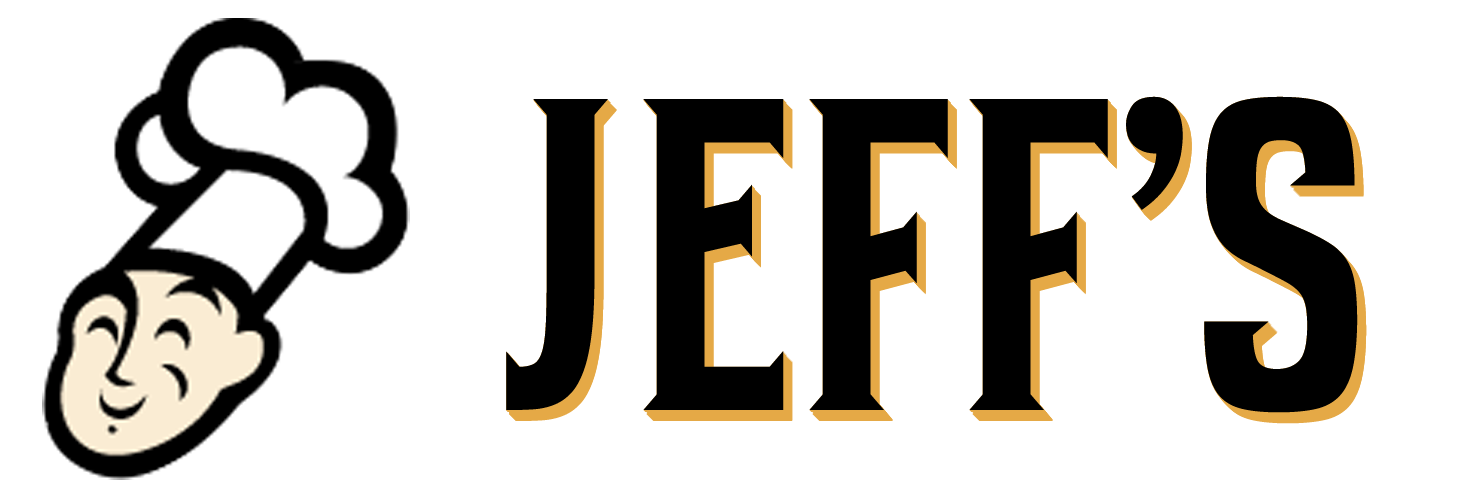
<style>
.page{position:relative;width:1465px;height:497px;background:#ffffff}
.page>*{position:absolute;margin:0}
.t1{font:444.4px "BartenderW01-Regular";letter-spacing:-0.03em;color:#000000}
</style>
<div class="page">
<p class="t1" style="left:506px;top:96px;width:852px;height:317px">JEFF’S</p>
<p class="t1" style="left:506px;top:97px;width:852px;height:317px">JEFF’S</p>
<p class="t1" style="left:506px;top:96px;width:852px;height:317px">JEFF’S</p>
<p class="t1" style="left:507px;top:97px;width:852px;height:317px">JEFF’S</p>
<p class="t1" style="left:507px;top:98px;width:852px;height:317px">JEFF’S</p>
<p class="t1" style="left:508px;top:98px;width:852px;height:317px">JEFF’S</p>
<p class="t1" style="left:509px;top:99px;width:852px;height:317px">JEFF’S</p>
<p class="t1" style="left:509px;top:100px;width:852px;height:317px">JEFF’S</p>
<p class="t1" style="left:509px;top:101px;width:852px;height:317px">JEFF’S</p>
<p class="t1" style="left:510px;top:101px;width:852px;height:317px">JEFF’S</p>
<p class="t1" style="left:510px;top:102px;width:852px;height:317px">JEFF’S</p>
<p class="t1" style="left:511px;top:102px;width:852px;height:317px">JEFF’S</p>
<p class="t1" style="left:511px;top:103px;width:852px;height:317px">JEFF’S</p>
<p class="t1" style="left:512px;top:103px;width:852px;height:317px">JEFF’S</p>
<p class="t1" style="left:512px;top:104px;width:852px;height:317px">JEFF’S</p>
<p class="t1" style="left:513px;top:104px;width:852px;height:317px">JEFF’S</p>
<p class="t1" style="left:513px;top:105px;width:852px;height:317px">JEFF’S</p>
<p class="t1" style="left:514px;top:105px;width:852px;height:317px">JEFF’S</p>
<p class="t1" style="left:514px;top:106px;width:852px;height:317px">JEFF’S</p>
<p class="t1" style="left:515px;top:106px;width:852px;height:317px">JEFF’S</p>
<p class="t1" style="left:515px;top:107px;width:852px;height:317px">JEFF’S</p>
</div>
